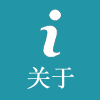
<style>
.page{position:relative;width:100px;height:100px;background:#2295a7}
.page>*{position:absolute;margin:0}
.t1{font:24px "NSimSun";color:#ffffff;font-weight:bold}
</style>
<div class="page">
<p class="t1" style="left:27px;top:66px;width:47px;height:23px">关于</p>
</div>
